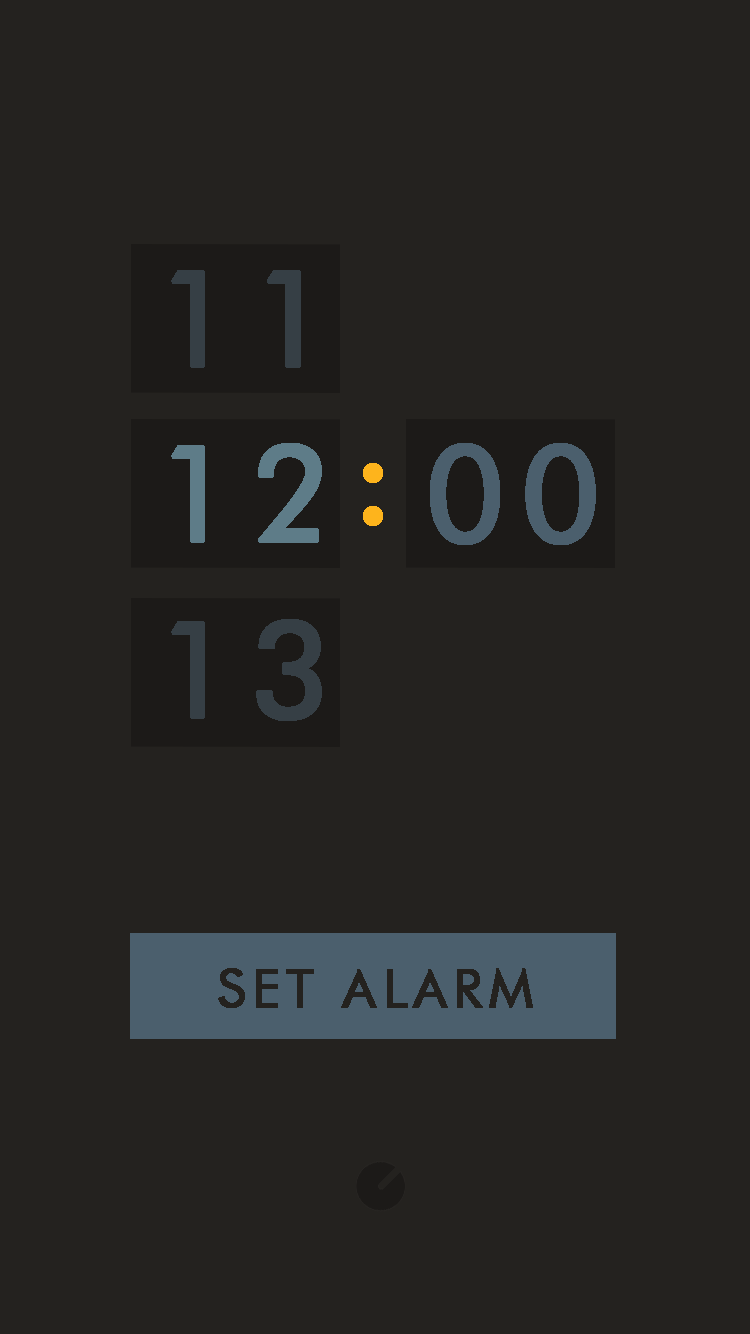
<style>
.page{position:relative;width:750px;height:1334px;background:#24221f}
.page>*{position:absolute;margin:0}
.t1{font:133.3px "FuturaBT-Book";letter-spacing:0.1em;color:#363f45;font-weight:bold}
.t2{font:133.3px "FuturaBT-Book";letter-spacing:0.1em;color:#5e7c88;font-weight:bold}
.t3{font:133.3px "FuturaBT-Book";letter-spacing:0.1em;color:#4b5f6d;font-weight:bold}
.t4{font:133.3px "FuturaBT-Book";letter-spacing:0.1em;color:#feb41c;font-weight:bold}
.t5{font:53.1px "FuturaBT-Book";letter-spacing:0.1em;color:#24221f;font-weight:bold}
</style>
<div class="page">
<p class="t1" style="left:171px;top:270px;width:130px;height:98px">11</p>
<p class="t2" style="left:171px;top:443px;width:151px;height:100px">12</p>
<p class="t3" style="left:430px;top:443px;width:166px;height:102px">00</p>
<p class="t4" style="left:363px;top:463px;width:20px;height:63px">:</p>
<p class="t1" style="left:171px;top:619px;width:151px;height:102px">13</p>
<p class="t5" style="left:218px;top:968px;width:315px;height:40px">SET ALARM</p>
</div>
